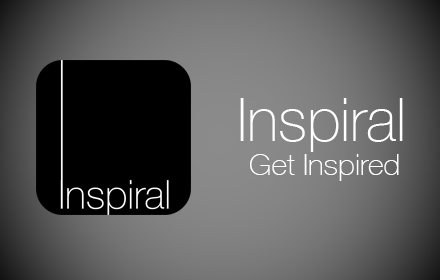
<style>
.page{position:relative;width:440px;height:280px}
.page>*{position:absolute;margin:0}
.t1{font:60px "HelveticaNeue-Thin";color:#ffffff}
.t2{font:30px "HelveticaNeue-Thin";color:#ffffff}
</style>
<div class="page">
<p class="t1" style="left:240px;top:98px;width:163px;height:54px">Inspiral</p>
<p class="t2" style="left:250px;top:154px;width:149px;height:27px">Get Inspired</p>
</div>
